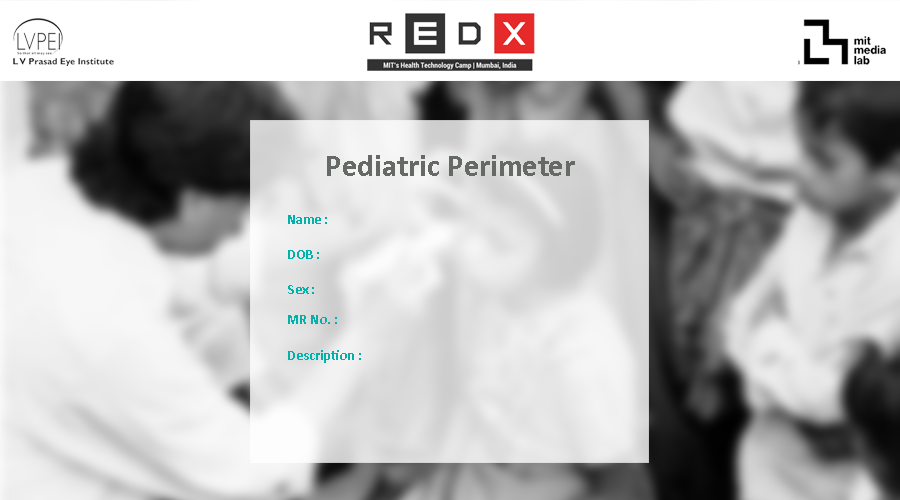
<style>
.page{position:relative;width:900px;height:500px}
.page>*{position:absolute;margin:0}
.t1{font:30.8px "Calibri-Bold";color:#656a67}
.t2{font:14px "Calibri-Bold";color:#00b2a9}
</style>
<div class="page">
<p class="t1" style="left:327px;top:155px;width:248px;height:21px">Pediatric Perimeter</p>
<p class="t2" style="left:288px;top:215px;width:39px;height:9px">Name :</p>
<p class="t2" style="left:288px;top:250px;width:31px;height:9px">DOB :</p>
<p class="t2" style="left:288px;top:285px;width:26px;height:9px">Sex :</p>
<p class="t2" style="left:288px;top:315px;width:49px;height:9px">MR No. :</p>
<p class="t2" style="left:288px;top:350px;width:73px;height:13px">Description :</p>
</div>
